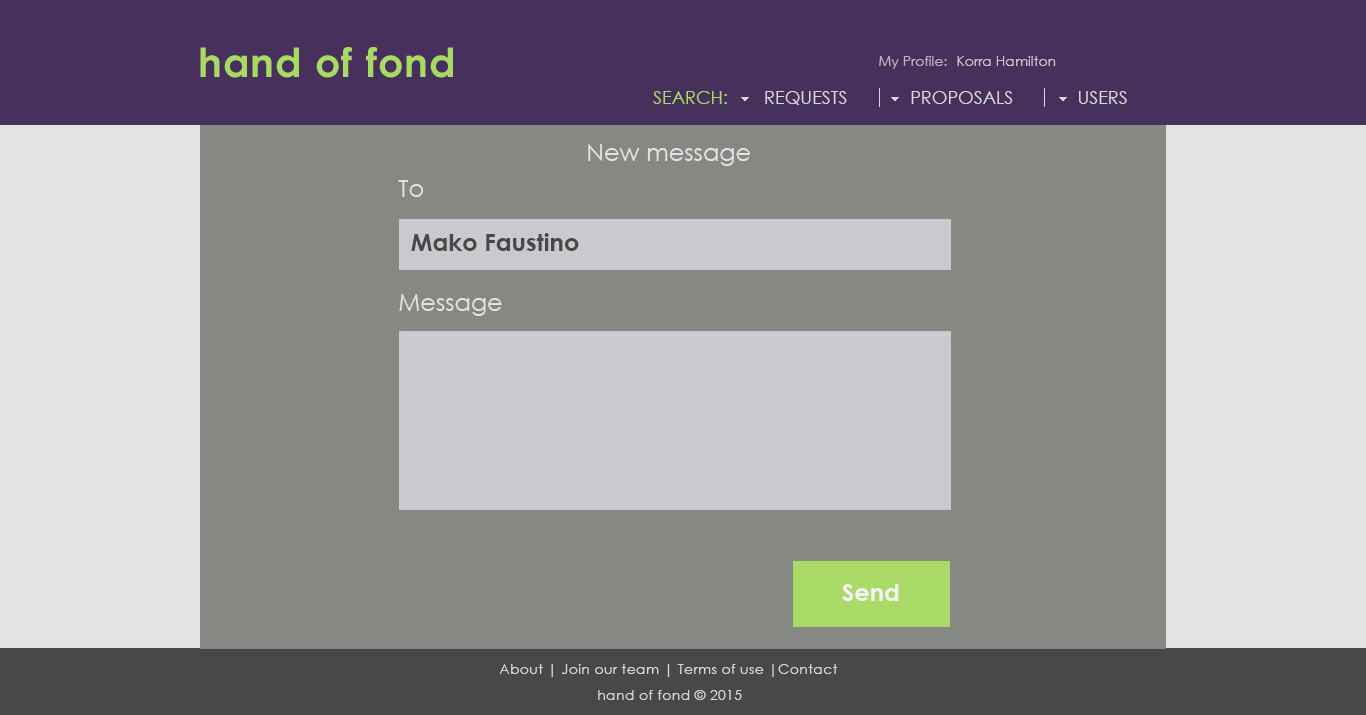
<style>
.page{position:relative;width:1366px;height:715px;background:#868983}
.page>*{position:absolute;margin:0}
.t1{font:14px "CenturyGothic";color:#bbb5b8}
.t2{font:14px "CenturyGothic";color:#c9c5c4}
.t3{font:18px "CenturyGothic";color:#a9da63}
.t4{font:18px "CenturyGothic";color:#d7d7d7}
.t5{font:24px "CenturyGothic";color:#e3e3e3}
.t6{font:24px "CenturyGothic-Bold";color:#484848}
.t7{font:24px "CenturyGothic-Bold";color:#f6f4f8}
.t8{font:14px "CenturyGothic";letter-spacing:0.025em;color:#d7d7d7}
</style>
<div class="page">
<p class="t1" style="left:879px;top:56px;width:68px;height:13px">My Profile:</p>
<p class="t2" style="left:957px;top:56px;width:99px;height:10px">Korra Hamilton</p>
<p class="t3" style="left:653px;top:91px;width:74px;height:13px">SEARCH:</p>
<p class="t4" style="left:765px;top:91px;width:82px;height:14px">REQUESTS</p>
<p class="t4" style="left:911px;top:91px;width:102px;height:13px">PROPOSALS</p>
<p class="t4" style="left:1079px;top:91px;width:48px;height:13px">USERS</p>
<p class="t5" style="left:588px;top:144px;width:162px;height:22px">New message</p>
<p class="t5" style="left:398px;top:180px;width:26px;height:17px">To</p>
<p class="t6" style="left:411px;top:233px;width:168px;height:18px">Mako Faustino</p>
<p class="t5" style="left:399px;top:294px;width:103px;height:22px">Message</p>
<p class="t7" style="left:842px;top:584px;width:57px;height:17px">Send</p>
<p class="t8" style="left:499px;top:664px;width:339px;height:13px">About | Join our team | Terms of use |Contact</p>
<p class="t8" style="left:598px;top:690px;width:144px;height:10px">hand of fond © 2015</p>
</div>
